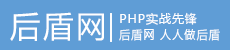
<style>
.page{position:relative;width:230px;height:50px;background:#5f9dd6}
.page>*{position:absolute;margin:0}
.t1{font:30.6px "MicrosoftYaHei";letter-spacing:0.08em;color:#ffffff}
.t2{font:12px "MicrosoftYaHei";letter-spacing:0.08em;color:#ffffff}
.t3{font:11.7px "MicrosoftYaHei";letter-spacing:0.08em;color:#ffffff;scale:0.97 1}
</style>
<div class="page">
<p class="t1" style="left:10px;top:12px;width:94px;height:29px">后盾网</p>
<p class="t2" style="left:120px;top:12px;width:77px;height:13px">PHP实战先锋</p>
<p class="t3" style="left:119px;top:29px;width:101px;height:12px">后盾网 人人做后盾</p>
</div>
